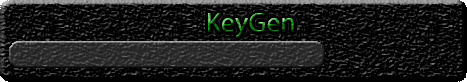
<style>
.page{position:relative;width:467px;height:82px;background:#000000}
.page>*{position:absolute;margin:0}
.t1{font:28px "MyriadPro-Regular"}
</style>
<div class="page">
<p class="t1" style="left:208px;top:13px;width:86px;height:25px">KeyGen</p>
</div>
